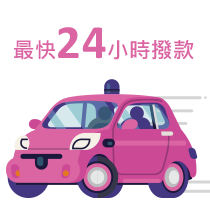
<style>
.page{position:relative;width:210px;height:210px;background:#ffffff}
.page>*{position:absolute;margin:0}
.t1{font:21.7px "MicrosoftJhengHeiBold";color:#da65a2}
.t2{font:48px "Calibri-Bold";color:#da65a2}
</style>
<div class="page">
<p class="t1" style="left:14px;top:27px;width:180px;height:33px">最快<span class="t2">24</span>小時撥款</p>
</div>
